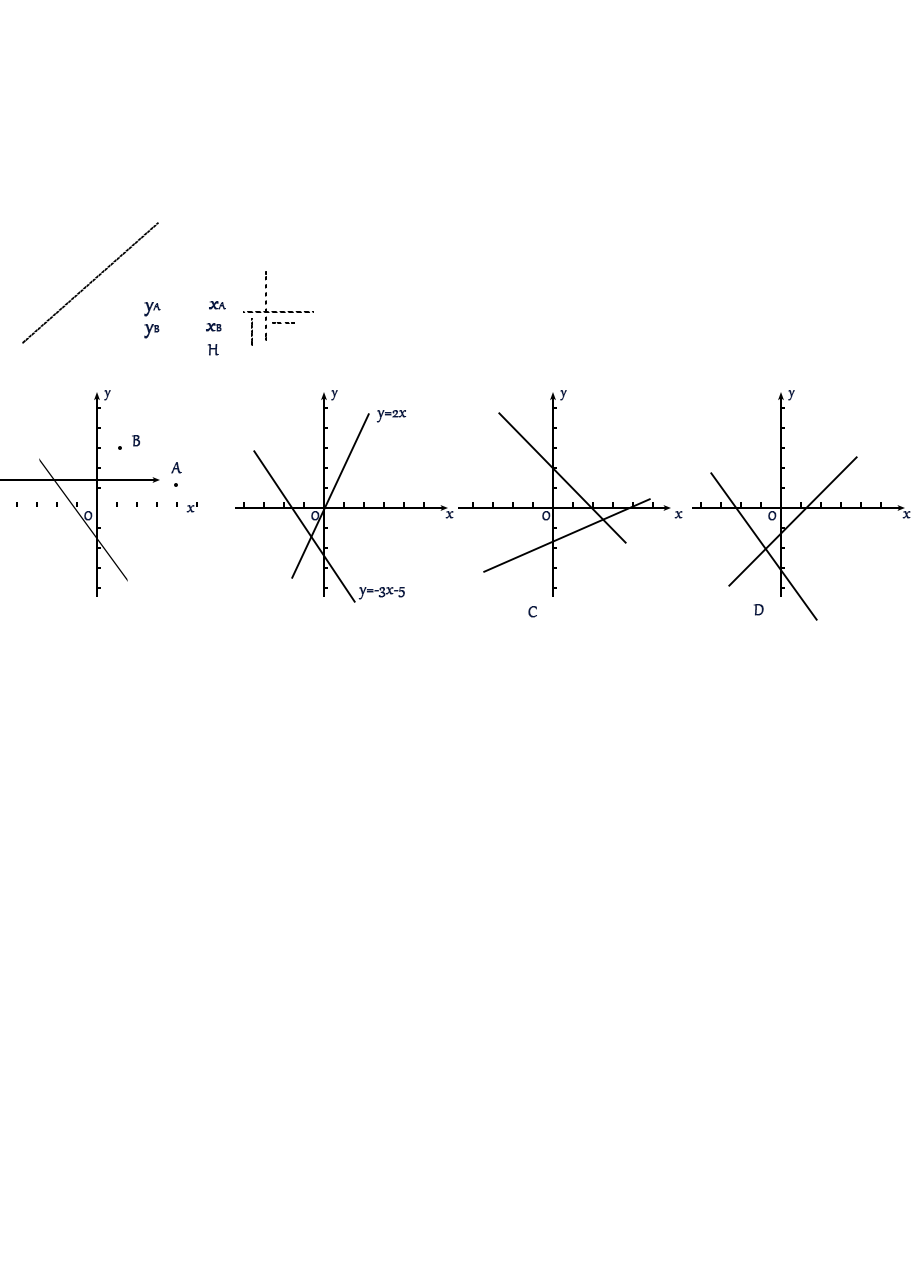
<style>
.page{position:relative;width:916px;height:1268px;background:#ffffff}
.page>*{position:absolute;margin:0}
.t1{font:24px "Gabriola";color:#081842;font-weight:bold}
.t2{font:13.3px "Gabriola";color:#081842;font-weight:bold}
.t3{font:18.7px "Gabriola";color:#081842;font-weight:bold}
.t4{font:16px "Gabriola";color:#081842;font-weight:bold}
</style>
<div class="page">
<p class="t1" style="left:144px;top:302px;width:17px;height:15px">y<span class="t2">A</span></p>
<p class="t1" style="left:208px;top:301px;width:18px;height:9px">x<span class="t2">A</span></p>
<p class="t1" style="left:144px;top:324px;width:16px;height:15px">y<span class="t2">B</span></p>
<p class="t1" style="left:205px;top:323px;width:17px;height:9px">x<span class="t2">B</span></p>
<p class="t3" style="left:207px;top:344px;width:12px;height:12px">H</p>
<p class="t4" style="left:104px;top:390px;width:7px;height:11px">y</p>
<p class="t4" style="left:331px;top:390px;width:7px;height:11px">y</p>
<p class="t4" style="left:560px;top:390px;width:7px;height:11px">y</p>
<p class="t4" style="left:788px;top:390px;width:7px;height:11px">y</p>
<p class="t3" style="left:376px;top:410px;width:31px;height:13px">y=2x</p>
<p class="t3" style="left:131px;top:435px;width:10px;height:12px">B</p>
<p class="t3" style="left:171px;top:462px;width:11px;height:12px">A</p>
<p class="t3" style="left:186px;top:505px;width:9px;height:8px">x</p>
<p class="t4" style="left:84px;top:511px;width:9px;height:10px">O</p>
<p class="t4" style="left:311px;top:511px;width:9px;height:10px">O</p>
<p class="t3" style="left:445px;top:511px;width:9px;height:8px">x</p>
<p class="t4" style="left:542px;top:511px;width:9px;height:10px">O</p>
<p class="t3" style="left:674px;top:511px;width:9px;height:8px">x</p>
<p class="t4" style="left:768px;top:511px;width:9px;height:10px">O</p>
<p class="t3" style="left:902px;top:511px;width:9px;height:8px">x</p>
<p class="t3" style="left:358px;top:587px;width:47px;height:13px">y=-3x-5</p>
<p class="t3" style="left:528px;top:606px;width:10px;height:12px">C</p>
<p class="t3" style="left:753px;top:604px;width:11px;height:12px">D</p>
</div>
